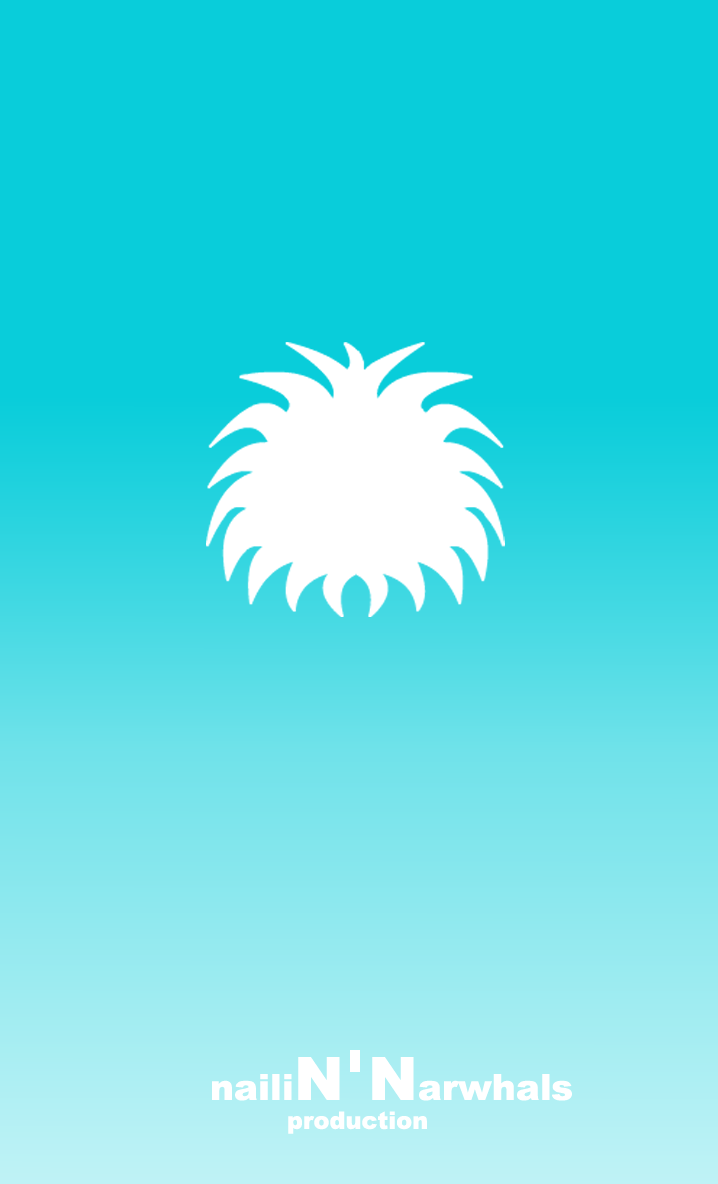
<style>
.page{position:relative;width:718px;height:1184px;background:#09cdda}
.page>*{position:absolute;margin:0}
.t1{font:24px "Arial-Black";color:#ffffff}
.t2{font:36px "Arial-Black";color:#ffffff}
.t3{font:60px "Arial-Black";color:#ffffff}
</style>
<div class="page">
<p class="t1" style="left:212px;top:1057px;width:360px;height:77px;text-align:center"><span class="t2">  naili</span><span class="t3">N  N</span><span class="t2">arwhals <br></span>production</p>
</div>
